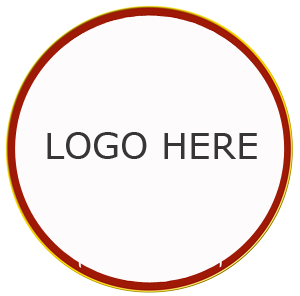
<style>
.page{position:relative;width:300px;height:296px;background:#fdfbfb}
.page>*{position:absolute;margin:0}
.t1{font:36px "Verdana";color:#373636}
</style>
<div class="page">
<p class="t1" style="left:47px;top:132px;width:210px;height:27px">LOGO HERE</p>
</div>
